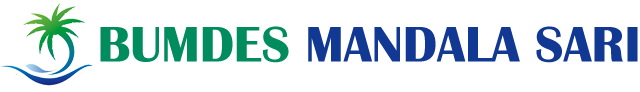
<style>
.page{position:relative;width:640px;height:92px;background:#ffffff}
.page>*{position:absolute;margin:0}
.t1{font:51.7px "BritannicBold";color:#113892}
.t2{font:51.7px "BritannicBold";color:#008c5c}
</style>
<div class="page">
<p class="t1" style="left:100px;top:26px;width:538px;height:37px"><span class="t2">BUMDES</span> MANDALA SARI</p>
</div>
